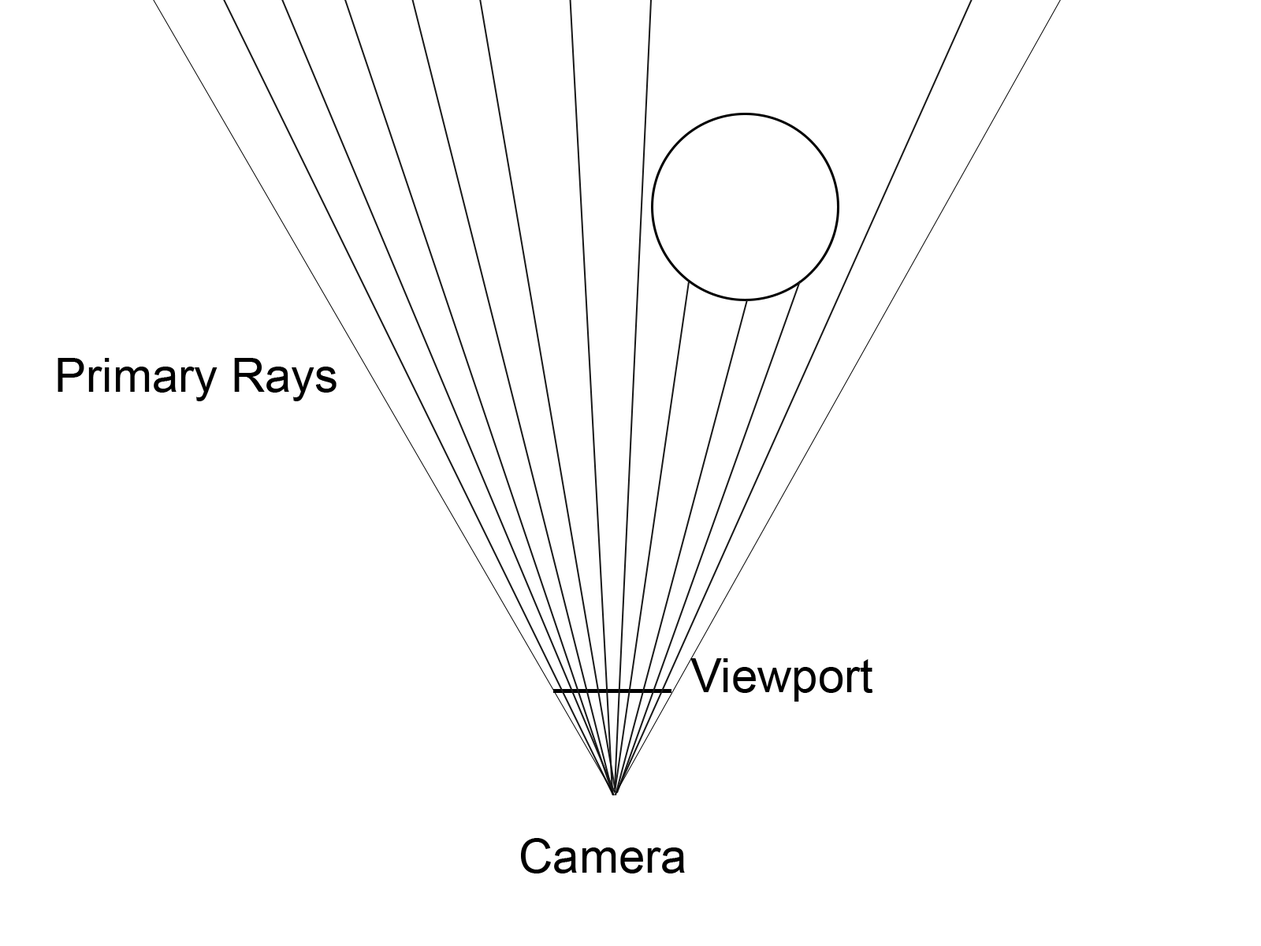
<style>
.page{position:relative;width:1261px;height:946px;background:#ffffff}
.page>*{position:absolute;margin:0}
.t1{font:47.3px "ArialMT";color:#000000}
</style>
<div class="page">
<p class="t1" style="left:58px;top:358px;width:279px;height:43px">Primary Rays</p>
<p class="t1" style="left:690px;top:658px;width:183px;height:43px">Viewport</p>
<p class="t1" style="left:521px;top:838px;width:164px;height:35px">Camera</p>
</div>
